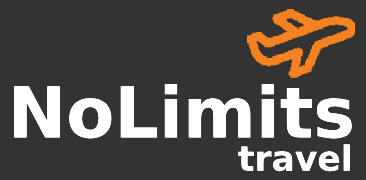
<style>
.page{position:relative;width:366px;height:180px;background:#333333}
.page>*{position:absolute;margin:0}
.t1{font:70px "DejaVuSans-Bold";color:#ffffff}
.t2{font:34.5px "DejaVuSans-Bold";color:#ffffff}
</style>
<div class="page">
<p class="t1" style="left:14px;top:84px;width:338px;height:55px">NoLimits</p>
<p class="t2" style="left:238px;top:144px;width:112px;height:28px">travel</p>
</div>
